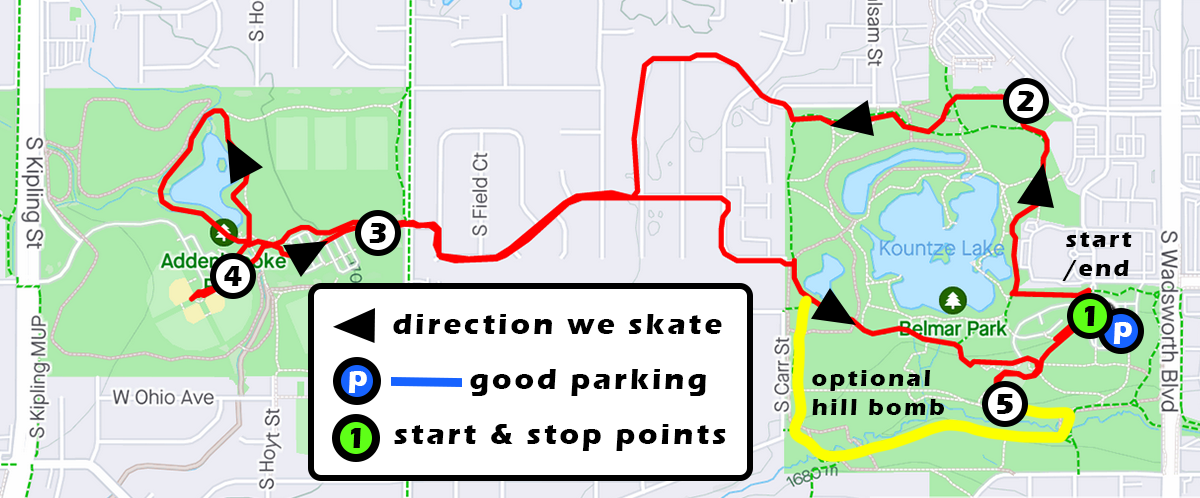
<style>
.page{position:relative;width:1200px;height:498px;background:#ececf4}
.page>*{position:absolute;margin:0}
.t1{font:30px "ErasITC-Bold";letter-spacing:0.1em;color:#000000}
.t2{font:24px "ErasITC-Bold";letter-spacing:0.1em;color:#000000}
.t3{font:30px "ErasITC-Bold";letter-spacing:0.1em;color:#ffffff}
</style>
<div class="page">
<p class="t1" style="left:1017px;top:91px;width:17px;height:20px">2</p>
<p class="t1" style="left:369px;top:223px;width:17px;height:20px">3</p>
<p class="t2" style="left:1062px;top:232px;width:70px;height:49px">start<br>/end</p>
<p class="t1" style="left:224px;top:266px;width:18px;height:20px">4</p>
<p class="t1" style="left:393px;top:314px;width:329px;height:20px">direction we skate</p>
<p class="t1" style="left:1084px;top:306px;width:11px;height:20px">1</p>
<p class="t3" style="left:1113px;top:322px;width:19px;height:22px">p</p>
<p class="t3" style="left:348px;top:371px;width:19px;height:22px">p</p>
<p class="t1" style="left:470px;top:369px;width:236px;height:27px">good parking</p>
<p class="t2" style="left:812px;top:370px;width:132px;height:45px">optional<br>hill bomb</p>
<p class="t1" style="left:997px;top:394px;width:16px;height:20px">5</p>
<p class="t1" style="left:394px;top:424px;width:332px;height:27px">start &amp; stop points</p>
<p class="t1" style="left:350px;top:428px;width:11px;height:20px">1</p>
</div>
